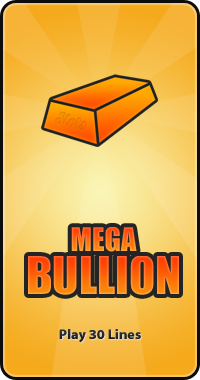
<style>
.page{position:relative;width:200px;height:380px}
.page>*{position:absolute;margin:0}
.t1{font:30px "Impact"}
.t2{font:48px "Impact"}
.t3{font:14px "MyriadWebPro-Bold";color:#262626}
</style>
<div class="page">
<p class="t1" style="left:71px;top:227px;width:66px;height:25px">MEGA</p>
<p class="t2" style="left:28px;top:256px;width:151px;height:39px">BULLION</p>
<p class="t3" style="left:0px;top:328px;width:200px;height:19px">Play 30 Lines</p>
</div>
